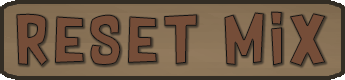
<style>
.page{position:relative;width:345px;height:80px}
.page>*{position:absolute;margin:0}
.t1{font:57.2px "SupersonicRocketship";letter-spacing:0.075em;color:#754d38;scale:1.1 1}
</style>
<div class="page">
<p class="t1" style="left:16px;top:11px;width:310px;height:55px">reset mix</p>
</div>
